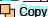
<style>
.page{position:relative;width:48px;height:17px;background:#ffffff}
.page>*{position:absolute;margin:0}
.t1{font:12px "ArialMT"}
</style>
<div class="page">
<p class="t1" style="left:19px;top:4px;width:29px;height:11px">Copy</p>
</div>
